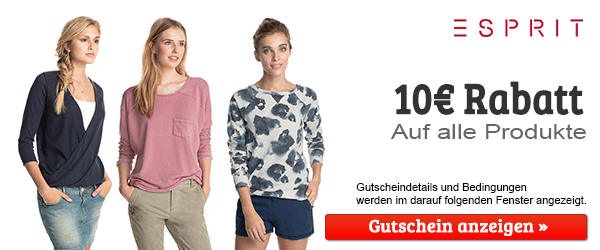
<style>
.page{position:relative;width:600px;height:250px;background:#ffffff}
.page>*{position:absolute;margin:0}
.t1{font:44px "BreeSerif-Regular";color:#333333;font-weight:bold;scale:0.85 1}
.t2{font:21.1px "ArialMT";color:#666666;scale:1.22 1}
.t3{font:11px "ArialMT";color:#000000}
.t4{font:18px "BreeSerif-Regular";color:#ffffff;font-weight:bold}
</style>
<div class="page">
<p class="t1" style="left:394px;top:81px;width:190px;height:34px">10€ Rabatt</p>
<p class="t2" style="left:390px;top:124px;width:196px;height:15px">Auf alle Produkte</p>
<p class="t3" style="left:356px;top:183px;width:230px;height:23px">Gutscheindetails und Bedingungen <br>werden im darauf folgenden Fenster angezeigt.</p>
<p class="t4" style="left:369px;top:219px;width:179px;height:17px">Gutschein anzeigen »</p>
</div>
